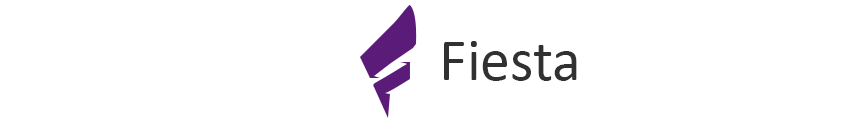
<style>
.page{position:relative;width:858px;height:129px;background:#ffffff}
.page>*{position:absolute;margin:0}
.t1{font:60px "Calibri";color:#313131}
</style>
<div class="page">
<p class="t1" style="left:444px;top:41px;width:133px;height:40px">Fiesta</p>
</div>
